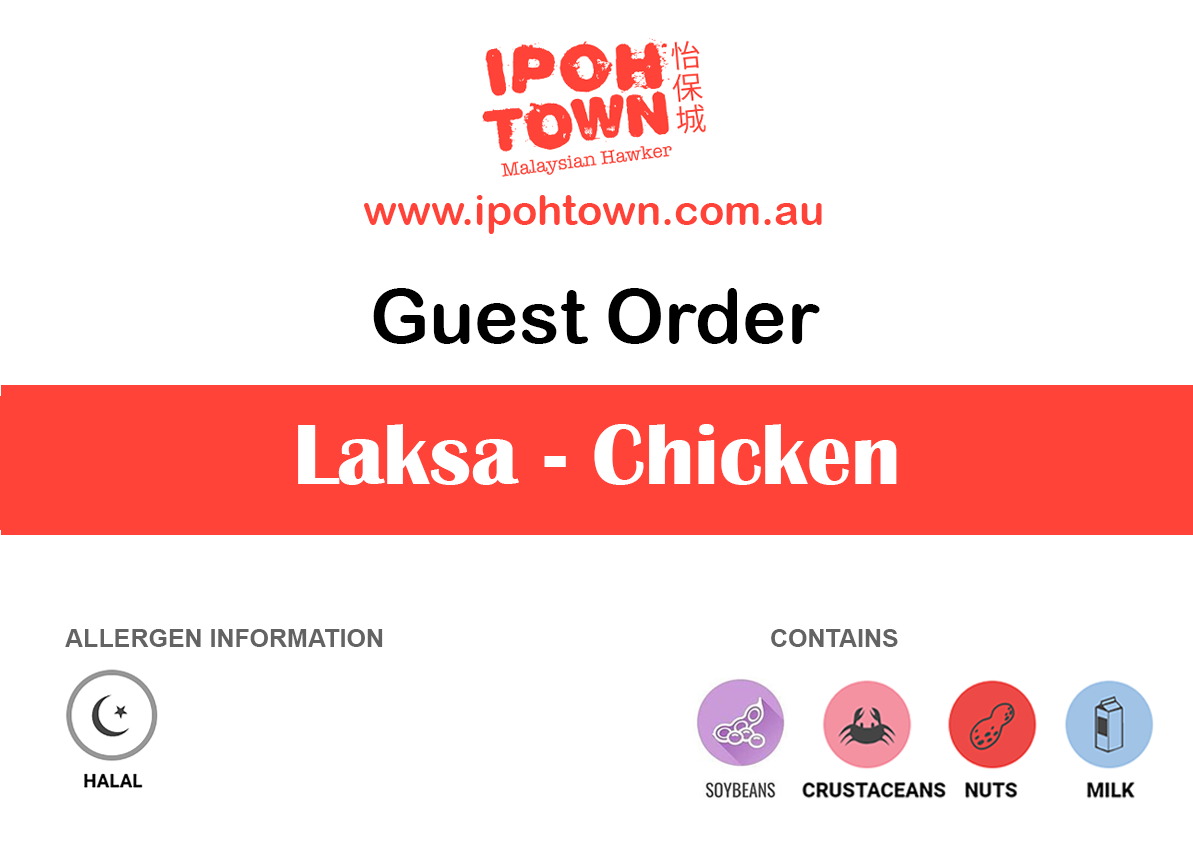
<style>
.page{position:relative;width:1193px;height:850px;background:#ffffff}
.page>*{position:absolute;margin:0}
.t1{font:41.7px "ArialRoundedMTBold";color:#ff4338}
.t2{font:75px "ArialRoundedMTBold";color:#000000}
.t3{font:87.5px "BritannicBold";color:#ffffff}
.t4{font:25px "Arial-BoldMT";color:#636363}
</style>
<div class="page">
<p class="t1" style="left:364px;top:195px;width:458px;height:39px">www.ipohtown.com.au</p>
<p class="t2" style="left:373px;top:288px;width:447px;height:56px">Guest Order</p>
<p class="t3" style="left:298px;top:424px;width:599px;height:61px">Laksa - Chicken</p>
<p class="t4" style="left:65px;top:629px;width:318px;height:18px">ALLERGEN INFORMATION</p>
<p class="t4" style="left:771px;top:629px;width:127px;height:18px">CONTAINS</p>
</div>
